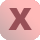
<style>
.page{position:relative;width:40px;height:40px}
.page>*{position:absolute;margin:0}
.t1{font:30px "Arial-Black";color:#984f57}
</style>
<div class="page">
<p class="t1" style="left:8px;top:8px;width:24px;height:22px">X</p>
</div>
